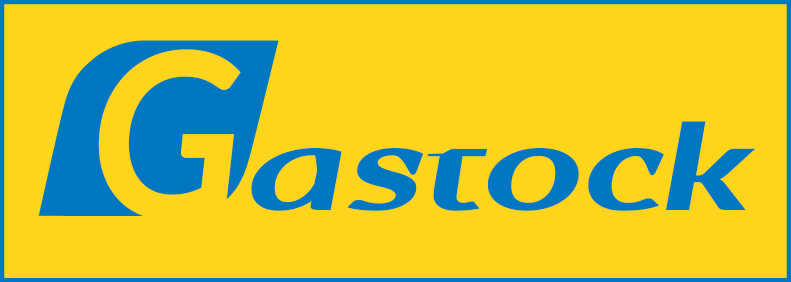
<style>
.page{position:relative;width:791px;height:282px;background:#ffd51b}
.page>*{position:absolute;margin:0}
.t1{font:256.7px "Carlito-BoldItalic";color:#ffd51b;scale:0.92 1}
.t2{font:126.1px "Carlito-BoldItalic";color:#0077c0;scale:1.5 1}
</style>
<div class="page">
<p class="t1" style="left:98px;top:49px;width:143px;height:171px">G</p>
<p class="t2" style="left:251px;top:121px;width:505px;height:90px">astock</p>
</div>
